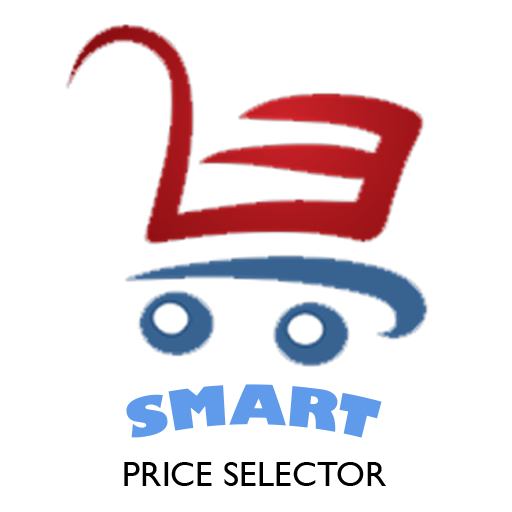
<style>
.page{position:relative;width:512px;height:512px;background:#ffffff}
.page>*{position:absolute;margin:0}
.t1{font:52.9px "GillSans-UltraBold";color:#609beb}
.t2{font:35.3px "GillSansMT";color:#000000}
</style>
<div class="page">
<p class="t1" style="left:126px;top:384px;width:256px;height:54px">SMART</p>
<p class="t2" style="left:124px;top:462px;width:262px;height:24px">PRICE SELECTOR</p>
</div>
